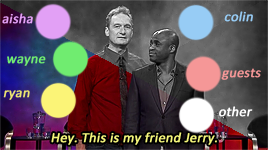
<style>
.page{position:relative;width:268px;height:150px}
.page>*{position:absolute;margin:0}
.t1{font:14px "Calibri";color:#e2a0f5;font-weight:bold;font-style:italic}
.t2{font:14px "Calibri";color:#97ccf5;font-weight:bold;font-style:italic}
.t3{font:14px "Calibri";color:#70ec70;font-weight:bold;font-style:italic}
.t4{font:14px "Calibri";color:#f59797;font-weight:bold;font-style:italic}
.t5{font:14px "Calibri";color:#ece570;font-weight:bold;font-style:italic}
.t6{font:14px "Calibri";color:#ffffff;font-weight:bold;font-style:italic}
.t7{font:14px "Calibri";color:#f5f67b;font-weight:bold;font-style:italic}
</style>
<div class="page">
<p class="t1" style="left:2px;top:13px;width:31px;height:11px">aisha</p>
<p class="t2" style="left:224px;top:11px;width:29px;height:11px">colin</p>
<p class="t3" style="left:7px;top:56px;width:39px;height:10px">wayne</p>
<p class="t4" style="left:221px;top:68px;width:40px;height:12px">guests</p>
<p class="t5" style="left:3px;top:90px;width:27px;height:10px">ryan</p>
<p class="t6" style="left:219px;top:106px;width:34px;height:11px">other</p>
<p class="t7" style="left:51px;top:132px;width:166px;height:13px">Hey. This is my friend Jerry.</p>
</div>
